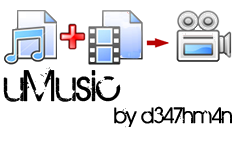
<style>
.page{position:relative;width:250px;height:142px;background:#ffffff}
.page>*{position:absolute;margin:0}
.t1{font:48px "BIRTHOFAHERO";color:#000000}
.t2{font:24px "BIRTHOFAHERO";color:#000000}
</style>
<div class="page">
<p class="t1" style="left:3px;top:67px;width:118px;height:35px">uMusic</p>
<p class="t2" style="left:114px;top:106px;width:118px;height:22px">by d347hm4n</p>
</div>
